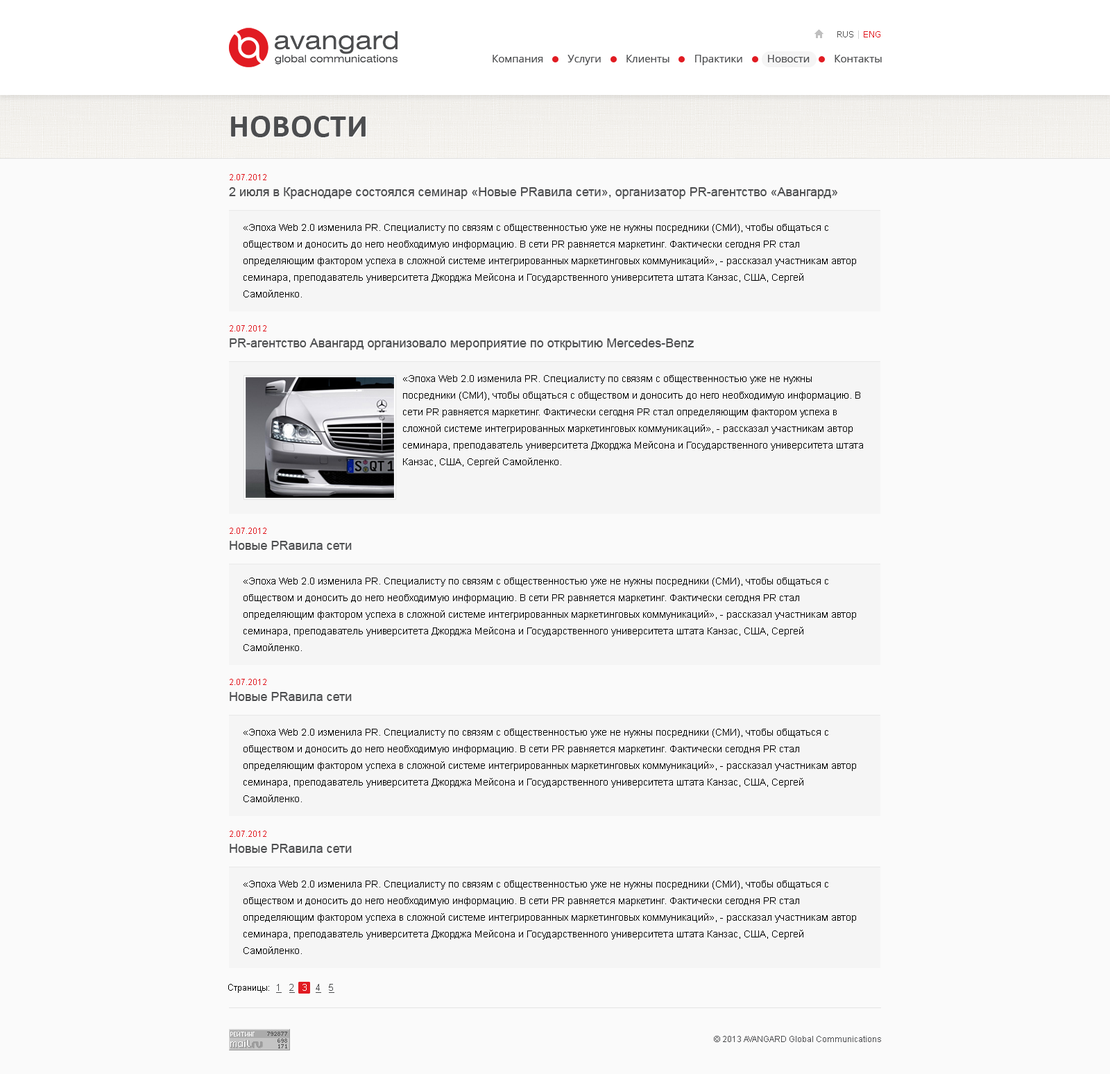
<style>
.page{position:relative;width:1110px;height:1074px;background:#fafafa}
.page>*{position:absolute;margin:0}
.t1{font:8.3px "Verdana";color:#555555}
.t2{font:8.3px "Verdana";color:#d1d1d1}
.t3{font:8.3px "Verdana";color:#e11b22}
.t4{font:10.4px "OpenSans";color:#4c4d4f}
.t5{font:31.9px "Calibri-Bold";letter-spacing:0.02em;color:#4c4d4f;text-transform:uppercase}
.t6{font:8.3px "ArialMT";color:#e11b22}
.t7{font:12.5px "ArialMT";color:#4c4d4f}
.t8{font:9.7px/16.6px "ArialMT";color:#000000}
.t9{font:9px "ArialMT";color:#000000}
.t10{font:9px "ArialMT";color:#4c4d4f;text-decoration:underline}
.t11{font:9px "ArialMT";color:#ffffff}
.t12{font:8.3px "ArialMT";color:#4c4d4f}
</style>
<div class="page">
<p class="t1" style="left:837px;top:31px;width:43px;height:8px">RUS<span class="t2"> | </span><span class="t3">ENG</span></p>
<p class="t4" style="left:492px;top:55px;width:390px;height:10px">Компания         Услуги         Клиенты         Практики         Новости         Контакты</p>
<p class="t5" style="left:231px;top:116px;width:135px;height:21px">Новости</p>
<p class="t6" style="left:230px;top:174px;width:36px;height:6px"><span class="t7"><br></span>2.07.2012</p>
<p class="t7" style="left:229px;top:187px;width:608px;height:12px">2 июля в Краснодаре состоялся семинар «Новые PRавила сети», организатор PR-агентство «Авангард»</p>
<p class="t8" style="left:243px;top:224px;width:613px;height:74px">«Эпоха Web 2.0 изменила PR. Специалисту по связям с общественностью уже не нужны посредники (СМИ), чтобы общаться с обществом и доносить до него необходимую информацию. В сети PR равняется маркетинг. Фактически сегодня PR стал определяющим фактором успеха в сложной системе интегрированных маркетинговых коммуникаций», - рассказал участникам автор семинара, преподаватель университета Джорджа Мейсона и Государственного университета штата Канзас, США, Сергей Самойленко.</p>
<p class="t6" style="left:230px;top:325px;width:36px;height:7px"><span class="t7"><br></span>2.07.2012</p>
<p class="t7" style="left:230px;top:338px;width:464px;height:12px">PR-агентство Авангард организовало мероприятие по открытию Mercedes-Benz</p>
<p class="t8" style="left:403px;top:375px;width:460px;height:93px">«Эпоха Web 2.0 изменила PR. Специалисту по связям с общественностью уже не нужны посредники (СМИ), чтобы общаться с обществом и доносить до него необходимую информацию. В сети PR равняется маркетинг. Фактически сегодня PR стал определяющим фактором успеха в сложной системе интегрированных маркетинговых коммуникаций», - рассказал участникам автор семинара, преподаватель университета Джорджа Мейсона и Государственного университета штата Канзас, США, Сергей Самойленко.</p>
<p class="t6" style="left:230px;top:528px;width:36px;height:6px"><span class="t7"><br></span>2.07.2012</p>
<p class="t7" style="left:230px;top:541px;width:122px;height:9px">Новые PRавила сети</p>
<p class="t8" style="left:243px;top:578px;width:613px;height:73px">«Эпоха Web 2.0 изменила PR. Специалисту по связям с общественностью уже не нужны посредники (СМИ), чтобы общаться с обществом и доносить до него необходимую информацию. В сети PR равняется маркетинг. Фактически сегодня PR стал определяющим фактором успеха в сложной системе интегрированных маркетинговых коммуникаций», - рассказал участникам автор семинара, преподаватель университета Джорджа Мейсона и Государственного университета штата Канзас, США, Сергей Самойленко.</p>
<p class="t6" style="left:230px;top:679px;width:36px;height:6px"><span class="t7"><br></span>2.07.2012</p>
<p class="t7" style="left:230px;top:692px;width:122px;height:9px">Новые PRавила сети</p>
<p class="t8" style="left:243px;top:729px;width:613px;height:74px">«Эпоха Web 2.0 изменила PR. Специалисту по связям с общественностью уже не нужны посредники (СМИ), чтобы общаться с обществом и доносить до него необходимую информацию. В сети PR равняется маркетинг. Фактически сегодня PR стал определяющим фактором успеха в сложной системе интегрированных маркетинговых коммуникаций», - рассказал участникам автор семинара, преподаватель университета Джорджа Мейсона и Государственного университета штата Канзас, США, Сергей Самойленко.</p>
<p class="t6" style="left:230px;top:831px;width:36px;height:6px"><span class="t7"><br></span>2.07.2012</p>
<p class="t7" style="left:230px;top:844px;width:122px;height:9px">Новые PRавила сети</p>
<p class="t8" style="left:243px;top:881px;width:613px;height:73px">«Эпоха Web 2.0 изменила PR. Специалисту по связям с общественностью уже не нужны посредники (СМИ), чтобы общаться с обществом и доносить до него необходимую информацию. В сети PR равняется маркетинг. Фактически сегодня PR стал определяющим фактором успеха в сложной системе интегрированных маркетинговых коммуникаций», - рассказал участникам автор семинара, преподаватель университета Джорджа Мейсона и Государственного университета штата Канзас, США, Сергей Самойленко.</p>
<p class="t9" style="left:228px;top:984px;width:106px;height:9px">Страницы:  <span class="t10">1   2  </span><span class="t11"> 3   </span><span class="t10">4   5</span></p>
<p class="t12" style="left:714px;top:1036px;width:167px;height:7px">© 2013 AVANGARD Global Communications</p>
</div>
